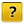
<style>
.page{position:relative;width:24px;height:24px;background:#ffffff}
.page>*{position:absolute;margin:0}
.t1{font:14px "Meiryo-Bold";color:#000000}
</style>
<div class="page">
<p class="t1" style="left:9px;top:6px;width:8px;height:11px">?</p>
</div>
